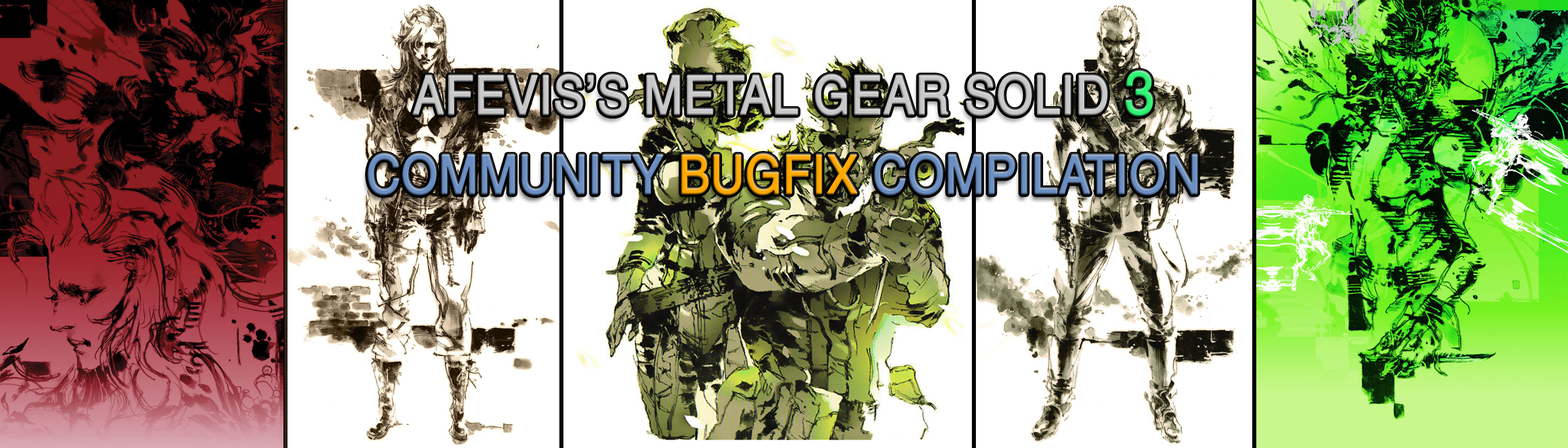
<style>
.page{position:relative;width:1568px;height:448px;background:#ffffff}
.page>*{position:absolute;margin:0}
.t1{font:52.9px "Helvetica";color:#c8c8c8;font-weight:bold;scale:0.88 1}
.t2{font:60.5px "Helvetica";color:#2ef373;font-weight:bold;scale:0.88 1}
.t3{font:52.9px "Helvetica";color:#6b8fc2;font-weight:bold;scale:0.88 1}
.t4{font:52.9px "Helvetica";color:#ffa800;font-weight:bold;scale:0.88 1}
</style>
<div class="page">
<p class="t1" style="left:412px;top:71px;width:741px;height:45px">AFEVIS’S METAL GEAR SOLID <span class="t2">3</span></p>
<p class="t3" style="left:368px;top:154px;width:830px;height:41px">COMMUNITY <span class="t4">BUGFIX </span>COMPILATION</p>
</div>
